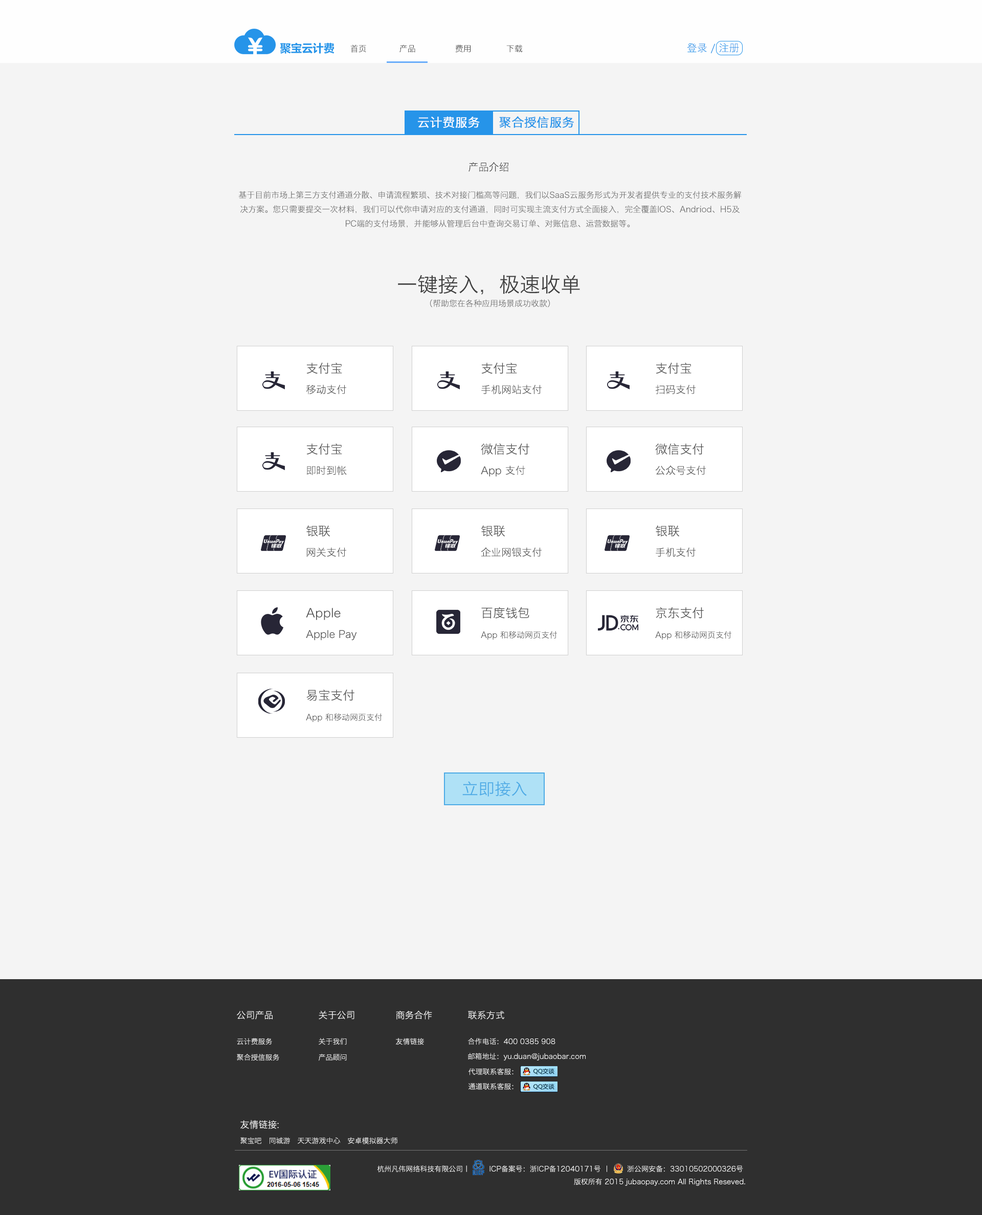
<style>
.page{position:relative;width:982px;height:1215px;background:#f4f4f4}
.page>*{position:absolute;margin:0}
.t1{font:8.2px "HiraginoSansGB-W3";color:#3b3b3b}
.t2{font:8.2px "HiraginoSansGB-W3"}
.t3{font:10.2px "HiraginoSansGB-W3";color:#2694e9}
.t4{font:12.3px "HiraginoSansGB-W3";color:#ffffff;font-weight:bold}
.t5{font:12.3px "HiraginoSansGB-W3";color:#2694e9;font-weight:bold}
.t6{font:10.2px "HiraginoSansGB-W3";color:#3f3f3f}
.t7{font:8.2px "HiraginoSansGB-W3";color:#666666}
.t8{font:20.5px "HiraginoSansGB-W3";color:#3f3f3f}
.t9{font:12.3px "HiraginoSansGB-W3";color:#4f4f4f}
.t10{font:10.2px "HiraginoSansGB-W3";color:#4f4f4f}
.t11{font:8.2px "HiraginoSansGB-W3";color:#4f4f4f}
.t12{font:16.4px "HiraginoSansGB-W3";color:#4caae5}
.t13{font:9.2px "HiraginoSansGB-W3";color:#ffffff}
.t14{font:7.2px "HiraginoSansGB-W3";color:#ffffff}
</style>
<div class="page">
<p class="t1" style="left:350px;top:44px;width:16px;height:9px">首页</p>
<p class="t1" style="left:399px;top:44px;width:16px;height:9px">产品</p>
<p class="t1" style="left:455px;top:44px;width:15px;height:9px">费用</p>
<p class="t2" style="left:506px;top:44px;width:17px;height:9px">下载</p>
<p class="t3" style="left:687px;top:43px;width:52px;height:10px">登录 / 注册</p>
<p class="t4" style="left:418px;top:116px;width:62px;height:12px">云计费服务</p>
<p class="t5" style="left:499px;top:116px;width:75px;height:12px">聚合授信服务</p>
<p class="t6" style="left:468px;top:162px;width:40px;height:10px">产品介绍</p>
<p class="t7" style="left:238px;top:191px;width:503px;height:37px;text-align:center">基于目前市场上第三方支付通道分散、申请流程繁琐、技术对接门槛高等问题，我们以SaaS云服务形式为开发者提供专业的支付技术服务解决方案。您只需要提交一次材料，我们可以代你申请对应的支付通道，同时可实现主流支付方式全面接入，完全覆盖IOS、Andriod、H5及PC端的支付场景，并能够从管理后台中查询交易订单、对账信息、运营数据等。</p>
<p class="t8" style="left:398px;top:275px;width:182px;height:20px">一键接入，极速收单</p>
<p class="t7" style="left:430px;top:299px;width:120px;height:8px">（帮助您在各种应用场景成功收款）</p>
<p class="t9" style="left:306px;top:362px;width:36px;height:12px">支付宝</p>
<p class="t9" style="left:481px;top:362px;width:36px;height:12px">支付宝</p>
<p class="t9" style="left:656px;top:362px;width:35px;height:12px">支付宝</p>
<p class="t10" style="left:306px;top:385px;width:40px;height:9px">移动支付</p>
<p class="t10" style="left:481px;top:385px;width:61px;height:9px">手机网站支付</p>
<p class="t10" style="left:656px;top:385px;width:39px;height:9px">扫码支付</p>
<p class="t9" style="left:306px;top:443px;width:36px;height:12px">支付宝</p>
<p class="t9" style="left:481px;top:443px;width:48px;height:12px">微信支付</p>
<p class="t9" style="left:655px;top:443px;width:49px;height:12px">微信支付</p>
<p class="t10" style="left:306px;top:465px;width:41px;height:10px">即时到帐</p>
<p class="t10" style="left:481px;top:465px;width:44px;height:12px">App 支付</p>
<p class="t10" style="left:655px;top:465px;width:51px;height:10px">公众号支付</p>
<p class="t9" style="left:306px;top:525px;width:24px;height:11px">银联</p>
<p class="t9" style="left:481px;top:525px;width:24px;height:11px">银联</p>
<p class="t9" style="left:656px;top:525px;width:23px;height:11px">银联</p>
<p class="t10" style="left:307px;top:547px;width:39px;height:10px">网关支付</p>
<p class="t10" style="left:481px;top:547px;width:61px;height:10px">企业网银支付</p>
<p class="t10" style="left:656px;top:547px;width:39px;height:10px">手机支付</p>
<p class="t9" style="left:306px;top:608px;width:35px;height:12px">Apple</p>
<p class="t9" style="left:481px;top:606px;width:48px;height:12px">百度钱包</p>
<p class="t9" style="left:656px;top:606px;width:48px;height:12px">京东支付</p>
<p class="t10" style="left:306px;top:629px;width:51px;height:11px">Apple Pay</p>
<p class="t11" style="left:481px;top:631px;width:76px;height:9px">App 和移动网页支付</p>
<p class="t11" style="left:655px;top:631px;width:76px;height:9px">App 和移动网页支付</p>
<p class="t9" style="left:306px;top:689px;width:48px;height:12px">易宝支付</p>
<p class="t11" style="left:306px;top:713px;width:76px;height:9px">App 和移动网页支付</p>
<p class="t12" style="left:462px;top:781px;width:65px;height:15px">立即接入</p>
<p class="t13" style="left:237px;top:1010px;width:36px;height:9px">公司产品</p>
<p class="t13" style="left:319px;top:1010px;width:35px;height:9px">关于公司</p>
<p class="t13" style="left:396px;top:1010px;width:36px;height:9px">商务合作</p>
<p class="t13" style="left:468px;top:1010px;width:36px;height:9px">联系方式</p>
<p class="t14" style="left:237px;top:1038px;width:35px;height:7px">云计费服务</p>
<p class="t14" style="left:319px;top:1038px;width:28px;height:6px">关于我们</p>
<p class="t14" style="left:396px;top:1038px;width:28px;height:7px">友情链接</p>
<p class="t14" style="left:468px;top:1038px;width:87px;height:6px">合作电话：400 0385 908</p>
<p class="t14" style="left:237px;top:1053px;width:42px;height:8px">聚合授信服务</p>
<p class="t14" style="left:319px;top:1053px;width:28px;height:8px">产品顾问</p>
<p class="t14" style="left:468px;top:1052px;width:118px;height:8px">邮箱地址：yu.duan@jubaobar.com</p>
<p class="t14" style="left:468px;top:1068px;width:45px;height:7px">代理联系客服：</p>
<p class="t14" style="left:468px;top:1083px;width:45px;height:6px">通道联系客服：</p>
<p class="t13" style="left:240px;top:1119px;width:39px;height:10px">友情链接:</p>
<p class="t14" style="left:240px;top:1137px;width:157px;height:7px">聚宝吧   同城游   天天游戏中心   安卓模拟器大师</p>
<p class="t14" style="left:377px;top:1165px;width:368px;height:20px;text-align:right">杭州凡伟网络科技有限公司丨        ICP备案号：浙ICP备12040171号 丨       浙公网安备：33010502000326号 <br>版权所有 2015 jubaopay.com All Rights Reseved.</p>
</div>
